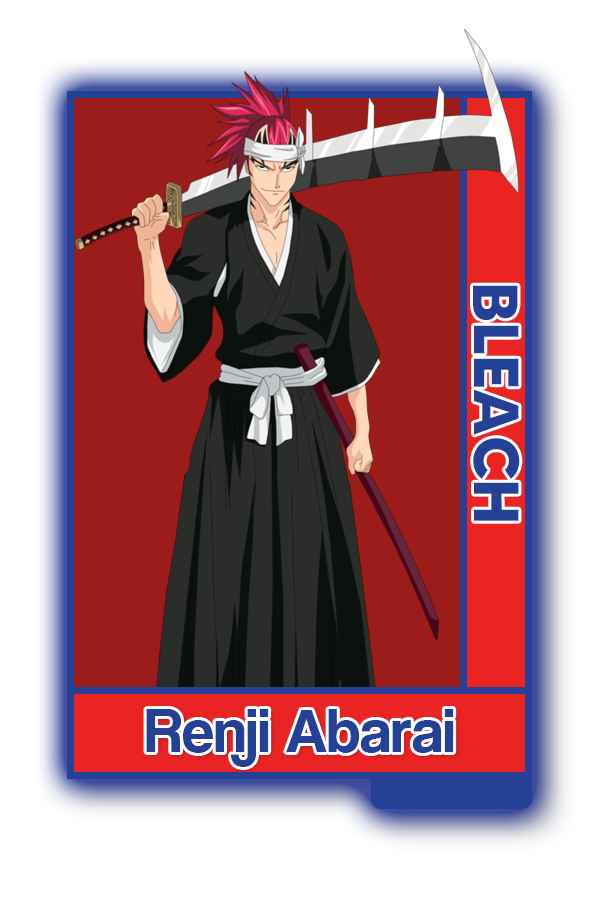
<style>
.page{position:relative;width:600px;height:900px;background:#ffffff}
.page>*{position:absolute;margin:0}
.t1{font:63.6px "MADETOMMY-Bold";color:#254195}
.t2{font:63.6px "CoolveticaRg-Regular";color:#254195}
</style>
<div class="page">
<p class="t1" style="left:473px;top:285px;width:47px;height:236px;rotate:90deg">BLEACH</p>
<p class="t2" style="left:146px;top:709px;width:308px;height:58px">Renji Abarai</p>
</div>
